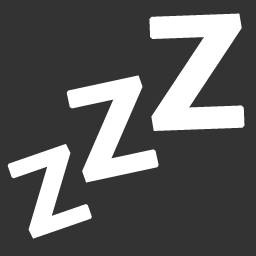
<style>
.page{position:relative;width:256px;height:256px;background:#333333}
.page>*{position:absolute;margin:0}
.t1{font:155.1px "BreezeSans-Bold";color:#ffffff;font-weight:bold;scale:1.05 1}
.t2{font:127.2px "BreezeSans-Bold";color:#ffffff;font-weight:bold;scale:1.05 1}
.t3{font:106.9px "BreezeSans-Bold";color:#ffffff;font-weight:bold;scale:1.05 1}
</style>
<div class="page">
<p class="t1" style="left:149px;top:13px;width:96px;height:118px;rotate:-2deg">Z</p>
<p class="t2" style="left:66px;top:75px;width:93px;height:108px;rotate:-12deg">Z</p>
<p class="t3" style="left:7px;top:144px;width:85px;height:95px;rotate:-19deg">Z</p>
</div>
